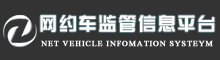
<style>
.page{position:relative;width:220px;height:60px;background:#333333}
.page>*{position:absolute;margin:0}
.t1{font:18px "CloudZongYiGBK";letter-spacing:0.1em;color:#ffffff;text-transform:uppercase}
.t2{font:12px "MicrosoftHimalaya";letter-spacing:0.05em;color:#ffffff;font-weight:bold}
</style>
<div class="page">
<p class="t1" style="left:40px;top:15px;width:175px;height:17px">网约车监管信息平台</p>
<p class="t2" style="left:41px;top:40px;width:172px;height:7px">NET VEHICLE INFOMATION SYSTEYM</p>
</div>
